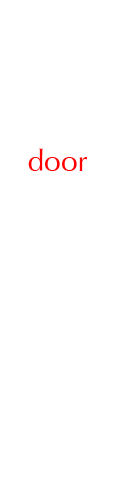
<style>
.page{position:relative;width:128px;height:500px;background:#ffffff}
.page>*{position:absolute;margin:0}
.t1{font:30px "Optima-Regular";color:#ff0000}
</style>
<div class="page">
<p class="t1" style="left:28px;top:148px;width:59px;height:23px">door</p>
</div>
